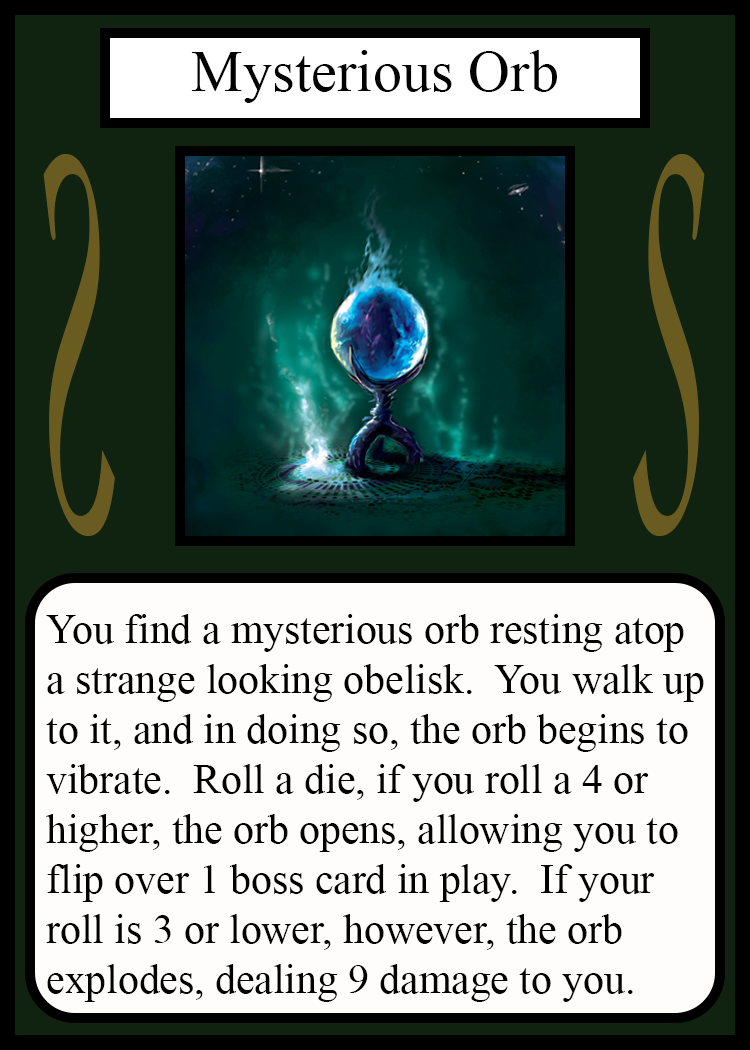
<style>
.page{position:relative;width:750px;height:1050px;background:#fffcfc}
.page>*{position:absolute;margin:0}
.t1{font:58.3px "TimesNewRomanPSMT";color:#010101}
.t2{font:548.5px "Apple-Chancery";color:#6a5c21;scale:0.27 1}
.t3{font:548.2px "Apple-Chancery";color:#6a5c21;scale:0.27 1}
.t4{font:41.7px "TimesNewRomanPSMT";color:#000000}
</style>
<div class="page">
<p class="t1" style="left:191px;top:50px;width:366px;height:53px">Mysterious Orb</p>
<p class="t2" style="left:43px;top:154px;width:72px;height:382px;rotate:180deg">S</p>
<p class="t3" style="left:633px;top:154px;width:72px;height:382px">S</p>
<p class="t4" style="left:46px;top:614px;width:658px;height:388px">You find a mysterious orb resting atop <br>a strange looking obelisk.  You walk up<br>to it, and in doing so, the orb begins to <br>vibrate.  Roll a die, if you roll a 4 or<br>higher, the orb opens, allowing you to <br>flip over 1 boss card in play.  If your<br>roll is 3 or lower, however, the orb<br>explodes, dealing 9 damage to you.</p>
</div>
